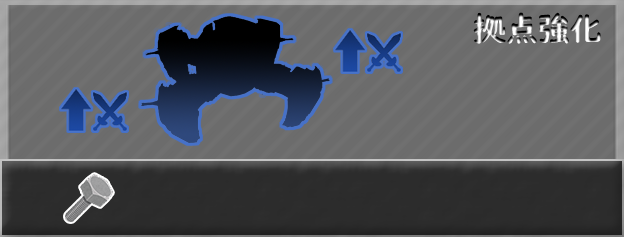
<style>
.page{position:relative;width:624px;height:237px;background:#6c6c6c}
.page>*{position:absolute;margin:0}
.t1{font:33.7px "UDDigiKyokashoNK-B";letter-spacing:-0.05em}
</style>
<div class="page">
<p class="t1" style="left:473px;top:12px;width:128px;height:32px">拠点強化</p>
</div>
